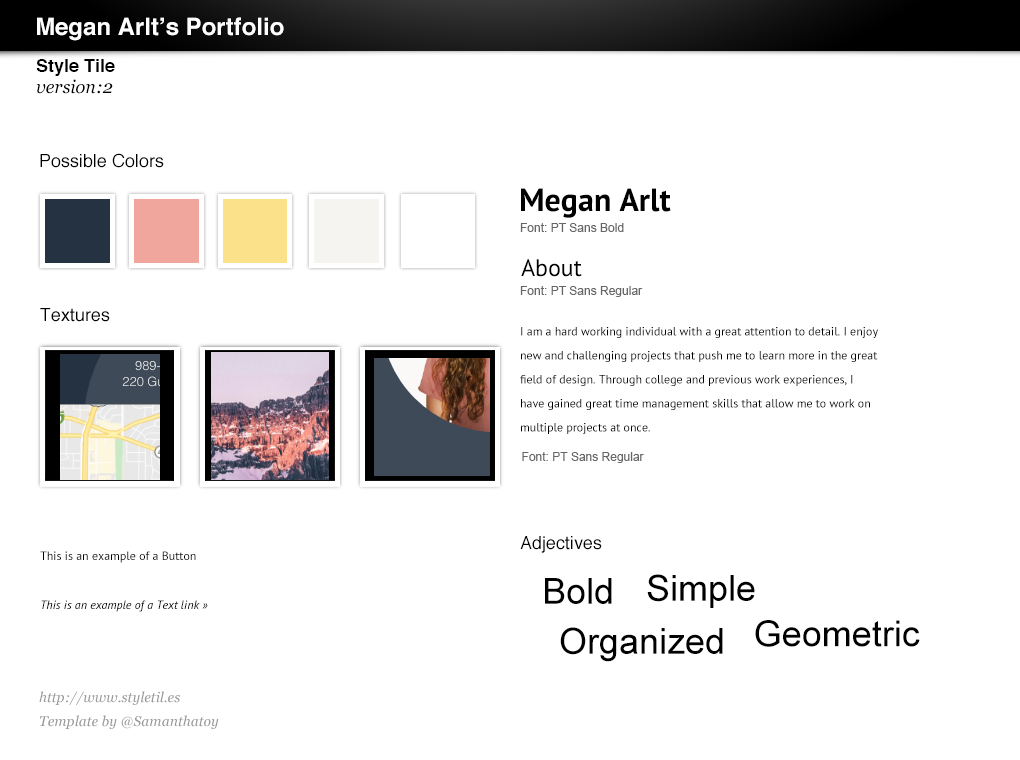
<style>
.page{position:relative;width:1020px;height:760px;background:#ffffff}
.page>*{position:absolute;margin:0}
.t1{font:24px "Helvetica-Bold";color:#ffffff}
.t2{font:18px "Helvetica-Bold";color:#000000}
.t3{font:18px "Georgia-Italic";color:#000000}
.t4{font:18px "Helvetica";color:#000000}
.t5{font:32px "PTSans-Bold";color:#000000}
.t6{font:12px "ArialMT";color:#666666}
.t7{font:24px "PTSans-Regular";color:#000000}
.t8{font:12px/24px "PTSans-Regular";color:#000000}
.t9{font:12px "PTSans-Regular";color:#000000}
.t10{font:36px "ArialMT";color:#000000}
.t11{font:12px "PTSans-Italic";color:#000000}
.t12{font:14px/24px "Georgia-Italic";color:#999999}
</style>
<div class="page">
<p class="t1" style="left:37px;top:17px;width:247px;height:24px">Megan Arlt’s Portfolio</p>
<p class="t2" style="left:36px;top:59px;width:79px;height:17px">Style Tile</p>
<p class="t3" style="left:36px;top:79px;width:77px;height:15px">version:2</p>
<p class="t4" style="left:40px;top:153px;width:124px;height:15px">Possible Colors</p>
<p class="t5" style="left:521px;top:188px;width:150px;height:30px">Megan Arlt</p>
<p class="t6" style="left:520px;top:223px;width:104px;height:9px">Font: PT Sans Bold</p>
<p class="t7" style="left:521px;top:259px;width:61px;height:18px">About</p>
<p class="t6" style="left:520px;top:286px;width:123px;height:11px">Font: PT Sans Regular</p>
<p class="t4" style="left:40px;top:308px;width:70px;height:14px">Textures</p>
<p class="t8" style="left:520px;top:327px;width:358px;height:107px">I am a hard working individual with a great attention to detail. I enjoy <br>new and challenging projects that push me to learn more in the great <br>field of design. Through college and previous work experiences, I<br>have gained great time management skills that allow me to work on <br>multiple projects at once.</p>
<p class="t6" style="left:522px;top:452px;width:122px;height:11px">Font: PT Sans Regular</p>
<p class="t4" style="left:520px;top:536px;width:82px;height:17px">Adjectives</p>
<p class="t9" style="left:40px;top:551px;width:156px;height:12px">This is an example of a Button</p>
<p class="t10" style="left:545px;top:578px;width:67px;height:26px">Bold</p>
<p class="t10" style="left:647px;top:574px;width:108px;height:34px">Simple</p>
<p class="t11" style="left:41px;top:600px;width:167px;height:12px">This is an example of a Text link »</p>
<p class="t10" style="left:560px;top:627px;width:163px;height:35px">Organized</p>
<p class="t10" style="left:755px;top:620px;width:165px;height:27px">Geometric</p>
<p class="t12" style="left:39px;top:691px;width:180px;height:38px">http://www.styletil.es<br>Template by @Samanthatoy</p>
</div>
